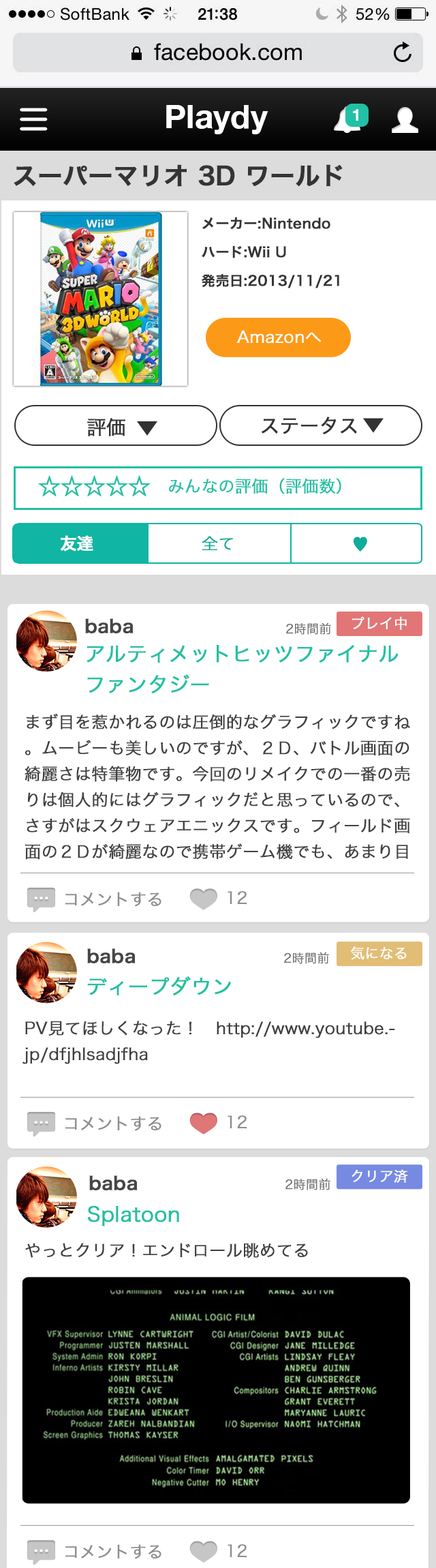
<style>
.page{position:relative;width:436px;height:1568px;background:#ffffff}
.page>*{position:absolute;margin:0}
.t1{font:32.7px "HelveticaNeue-Bold";color:#ffffff}
.t2{font:16.4px "HelveticaNeue-Bold";color:#ffffff}
.t3{font:24.5px "HiraKakuPro-W6";color:#343434;font-weight:bold}
.t4{font:13.6px/28.6px "HiraKakuPro-W6";color:#343434;font-weight:bold}
.t5{font:16.2px "HiraKakuPro-W3";color:#ffffff;font-weight:bold}
.t6{font:19.2px "HiraKakuPro-W3";color:#333333;font-weight:bold}
.t7{font:19.4px "HiraKakuPro-W3";color:#333333;font-weight:bold}
.t8{font:21.8px "HiraKakuPro-W6";color:#22c0a4;font-weight:bold}
.t9{font:16.4px "HiraKakuPro-W3";color:#22c0a4;font-weight:bold}
.t10{font:16.4px "HiraKakuPro-W6";color:#ffffff;font-weight:bold}
.t11{font:16.4px "HiraKakuPro-W3";color:#10ac9b;font-weight:bold}
.t12{font:14.2px "HiraKakuPro-W3";color:#ffffff;font-weight:bold}
.t13{font:17.7px "HiraKakuPro-W6";color:#464646;font-weight:bold}
.t14{font:12.3px "HiraKakuPro-W3";color:#717171;font-weight:bold}
.t15{font:20.5px/30.7px "HiraKakuPro-W3";color:#22c0a4;font-weight:bold}
.t16{font:16.4px/25.9px "HiraKakuPro-W3";color:#404040;font-weight:bold}
.t17{font:16.4px "HiraKakuPro-W3";color:#8d8e8e;font-weight:bold}
.t18{font:20.4px "HiraKakuPro-W3";color:#22c0a4;font-weight:bold}
.t19{font:20.5px "HiraKakuPro-W3";color:#22c0a4;font-weight:bold}
.t20{font:16.4px "HiraKakuPro-W3";color:#404040;font-weight:bold}
</style>
<div class="page">
<p class="t1" style="left:166px;top:105px;width:103px;height:29px">Playdy</p>
<p class="t2" style="left:353px;top:109px;width:6px;height:12px">1</p>
<p class="t3" style="left:14px;top:164px;width:329px;height:23px">スーパーマリオ 3D ワールド</p>
<p class="t4" style="left:202px;top:217px;width:138px;height:71px">メーカー:Nintendo<br>ハード:Wii U<br>発売日:2013/11/21</p>
<p class="t5" style="left:237px;top:330px;width:84px;height:14px">Amazonへ</p>
<p class="t6" style="left:87px;top:418px;width:38px;height:18px">評価</p>
<p class="t7" style="left:262px;top:417px;width:95px;height:17px">ステータス</p>
<p class="t8" style="left:38px;top:475px;width:113px;height:21px">☆☆☆☆☆</p>
<p class="t9" style="left:169px;top:478px;width:173px;height:16px">みんなの評価（評価数）</p>
<p class="t10" style="left:60px;top:535px;width:33px;height:17px">友達</p>
<p class="t11" style="left:202px;top:536px;width:31px;height:15px">全て</p>
<p class="t11" style="left:353px;top:537px;width:14px;height:15px">♥</p>
<p class="t12" style="left:352px;top:616px;width:55px;height:14px">プレイ中</p>
<p class="t13" style="left:85px;top:618px;width:49px;height:15px">baba</p>
<p class="t14" style="left:286px;top:622px;width:45px;height:13px">2時間前</p>
<p class="t15" style="left:87px;top:645px;width:312px;height:48px">アルティメットヒッツファイナル<br>ファンタジー</p>
<p class="t16" style="left:25px;top:714px;width:385px;height:146px">まず目を惹かれるのは圧倒的なグラフィックですね。ムービーも美しいのですが、２Ｄ、バトル画面の綺麗さは特筆物です。今回のリメイクでの一番の売りは個人的にはグラフィックだと思っているので、さすがはスクウェアエニックスです。フィールド画面の２Ｄが綺麗なので携帯ゲーム機でも、あまり目に負担になりにくいのも良いですね。</p>
<p class="t17" style="left:65px;top:892px;width:97px;height:15px">コメントする</p>
<p class="t17" style="left:228px;top:891px;width:19px;height:14px">12</p>
<p class="t13" style="left:87px;top:948px;width:49px;height:15px">baba</p>
<p class="t14" style="left:284px;top:952px;width:45px;height:12px">2時間前</p>
<p class="t12" style="left:351px;top:946px;width:56px;height:14px">気になる</p>
<p class="t18" style="left:87px;top:976px;width:144px;height:19px">ディープダウン</p>
<p class="t16" style="left:22px;top:1021px;width:373px;height:43px">PV見てほしくなった！　http://www.youtube.jp/dfjhlsadjfha</p>
<p class="t17" style="left:65px;top:1116px;width:97px;height:15px">コメントする</p>
<p class="t17" style="left:228px;top:1115px;width:19px;height:14px">12</p>
<p class="t12" style="left:352px;top:1169px;width:56px;height:14px">クリア済</p>
<p class="t13" style="left:89px;top:1175px;width:49px;height:15px">baba</p>
<p class="t14" style="left:286px;top:1178px;width:45px;height:12px">2時間前</p>
<p class="t19" style="left:87px;top:1205px;width:92px;height:21px">Splatoon</p>
<p class="t20" style="left:25px;top:1243px;width:283px;height:15px">やっとクリア！エンドロール眺めてる</p>
<p class="t17" style="left:65px;top:1544px;width:97px;height:15px">コメントする</p>
<p class="t17" style="left:228px;top:1544px;width:19px;height:14px">12</p>
</div>
